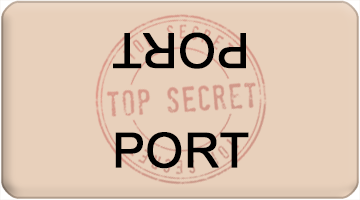
<style>
.page{position:relative;width:360px;height:200px;background:#e8d0bb}
.page>*{position:absolute;margin:0}
.t1{font:48px "ArialMT";color:#000000;font-weight:bold}
</style>
<div class="page">
<p class="t1" style="left:113px;top:32px;width:133px;height:37px;rotate:180deg">PORT</p>
<p class="t1" style="left:115px;top:132px;width:134px;height:37px">PORT</p>
</div>
